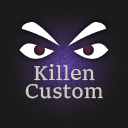
<style>
.page{position:relative;width:128px;height:128px;background:#1c1b1a}
.page>*{position:absolute;margin:0}
.t1{font:20.8px "Sitka-Small";color:#cecdc3}
</style>
<div class="page">
<p class="t1" style="left:34px;top:64px;width:61px;height:17px">Killen</p>
<p class="t1" style="left:25px;top:83px;width:78px;height:16px">Custom</p>
</div>
